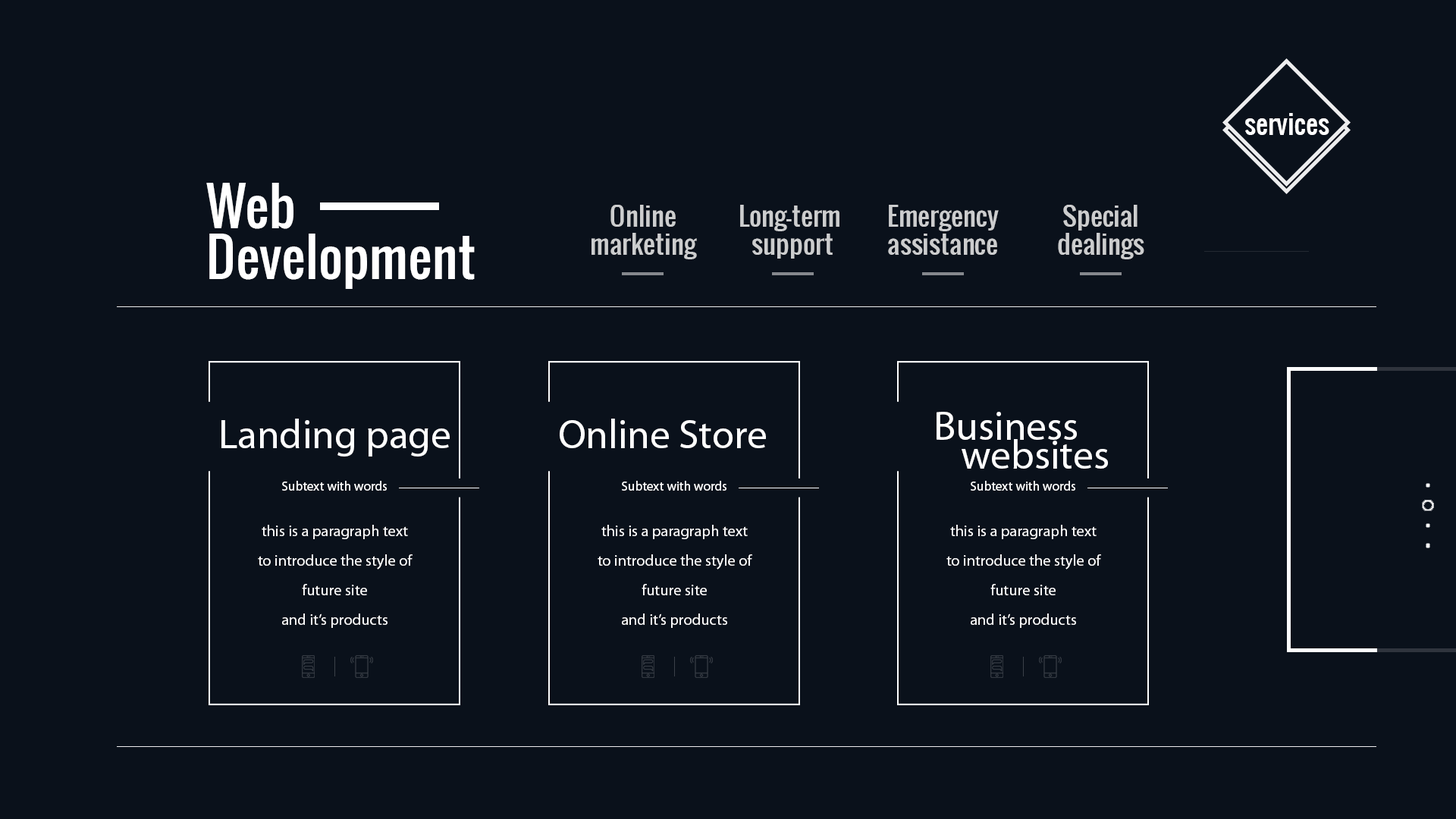
<style>
.page{position:relative;width:1456px;height:819px;background:#0a111b}
.page>*{position:absolute;margin:0}
.t1{font:26.5px "Oswald-Regular";color:#ffffff}
.t2{font:51.7px/51px "Oswald-Regular";color:#ffffff}
.t3{font:26.1px/28.3px "Oswald-Regular";color:#cccdce}
.t4{font:40.6px/28.8px "MyriadPro-Regular";color:#ffffff}
.t5{font:40.6px "MyriadPro-Regular";color:#ffffff}
.t6{font:13.1px "MyriadPro-Regular";color:#ffffff}
.t7{font:15.5px/29.6px "MyriadPro-Regular";color:#ffffff}
</style>
<div class="page">
<p class="t1" style="left:1245px;top:113px;width:84px;height:22px">services</p>
<p class="t2" style="left:206px;top:183px;width:269px;height:106px;text-align:right">Web<br>Development</p>
<p class="t3" style="left:591px;top:205px;width:106px;height:54px;text-align:center">Online<br>marketing</p>
<p class="t3" style="left:740px;top:205px;width:99px;height:54px;text-align:center">Long-term <br>support</p>
<p class="t3" style="left:888px;top:205px;width:111px;height:50px;text-align:center">Emergency<br>assistance</p>
<p class="t3" style="left:1058px;top:205px;width:86px;height:54px;text-align:center">Special<br>dealings</p>
<p class="t4" style="left:937px;top:412px;width:171px;height:57px;text-align:right">Business <br> websites</p>
<p class="t5" style="left:221px;top:419px;width:229px;height:38px">Landing page</p>
<p class="t5" style="left:560px;top:419px;width:206px;height:29px">Online Store</p>
<p class="t6" style="left:282px;top:481px;width:105px;height:10px">Subtext with words</p>
<p class="t6" style="left:622px;top:481px;width:104px;height:10px">Subtext with words</p>
<p class="t6" style="left:971px;top:481px;width:104px;height:10px">Subtext with words</p>
<p class="t7" style="left:258px;top:525px;width:155px;height:103px;text-align:center">this is a paragraph text to introduce the style of future site<br>and it’s products</p>
<p class="t7" style="left:598px;top:525px;width:154px;height:103px;text-align:center">this is a paragraph text to introduce the style of future site<br>and it’s products</p>
<p class="t7" style="left:946px;top:525px;width:155px;height:103px;text-align:center">this is a paragraph text to introduce the style of future site<br>and it’s products</p>
</div>
